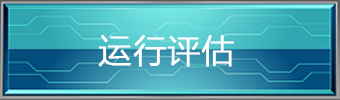
<style>
.page{position:relative;width:340px;height:100px}
.page>*{position:absolute;margin:0}
.t1{font:33.3px "MicrosoftYaHeiLight";color:#ffffff;font-weight:bold}
</style>
<div class="page">
<p class="t1" style="left:98px;top:35px;width:137px;height:32px">运行评估</p>
</div>
